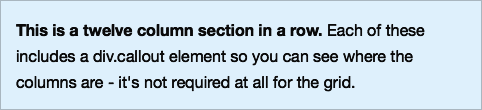
<style>
.page{position:relative;width:482px;height:110px;background:#def0fc}
.page>*{position:absolute;margin:0}
.t1{font:12px "MyriadPro-Regular";color:#000000}
.t2{font:12px "HelveticaNeue-Bold";color:#000000}
</style>
<div class="page">
<p class="t1" style="left:16px;top:23px;width:409px;height:69px"><span class="t2">This is a twelve column section in a row.</span> Each of these includes a div.callout element so you can see where the columns are - it's not required at all for the grid.</p>
</div>
